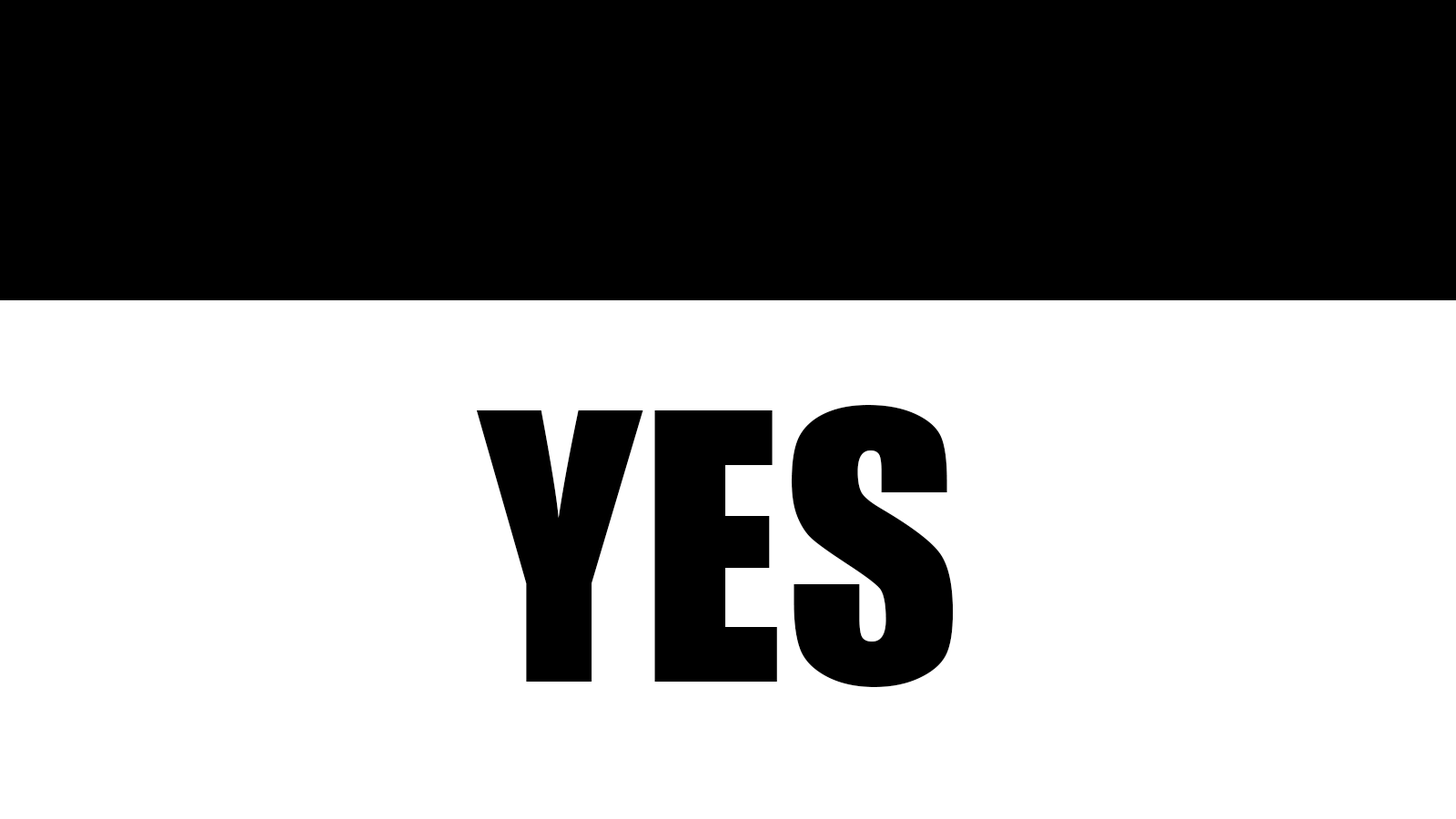
<style>
.page{position:relative;width:1456px;height:819px;background:#ffffff}
.page>*{position:absolute;margin:0}
.t1{font:343.2px "Impact";color:#000000}
</style>
<div class="page">
<p class="t1" style="left:476px;top:405px;width:478px;height:282px">YES</p>
</div>
